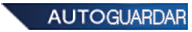
<style>
.page{position:relative;width:192px;height:32px;background:#ffffff}
.page>*{position:absolute;margin:0}
.t1{font:19.7px "AcuminPro-Thin";letter-spacing:-0.025em;color:#ffffff;scale:0.91 1}
</style>
<div class="page">
<p class="t1" style="left:107px;top:10px;width:79px;height:14px">GUARDAR</p>
<p class="t1" style="left:107px;top:10px;width:79px;height:14px">GUARDAR</p>
</div>
